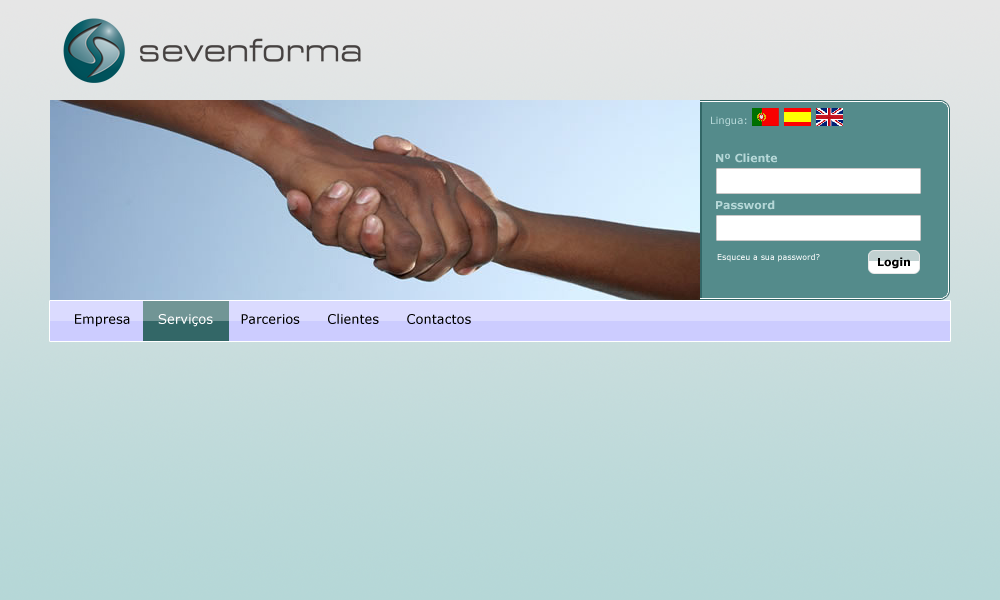
<style>
.page{position:relative;width:1000px;height:600px}
.page>*{position:absolute;margin:0}
.t1{font:10px "Verdana";color:#b5d7d7}
.t2{font:11px "Verdana-Bold";color:#b5d7d7}
.t3{font:8px "Verdana";color:#ffffff}
.t4{font:11px "Verdana-Bold";color:#000000}
.t5{font:13px "Verdana";color:#000000}
.t6{font:13px "Verdana";color:#ffffff}
</style>
<div class="page">
<p class="t1" style="left:711px;top:116px;width:36px;height:10px">Lingua:</p>
<p class="t2" style="left:716px;top:153px;width:61px;height:10px">Nº Cliente</p>
<p class="t2" style="left:716px;top:200px;width:59px;height:10px">Password</p>
<p class="t3" style="left:717px;top:253px;width:103px;height:9px">Esquceu a sua password?</p>
<p class="t4" style="left:878px;top:257px;width:32px;height:12px">Login</p>
<p class="t5" style="left:75px;top:313px;width:396px;height:14px">Empresa      <span class="t6">Serviços</span>      Parcerios      Clientes      Contactos</p>
</div>
